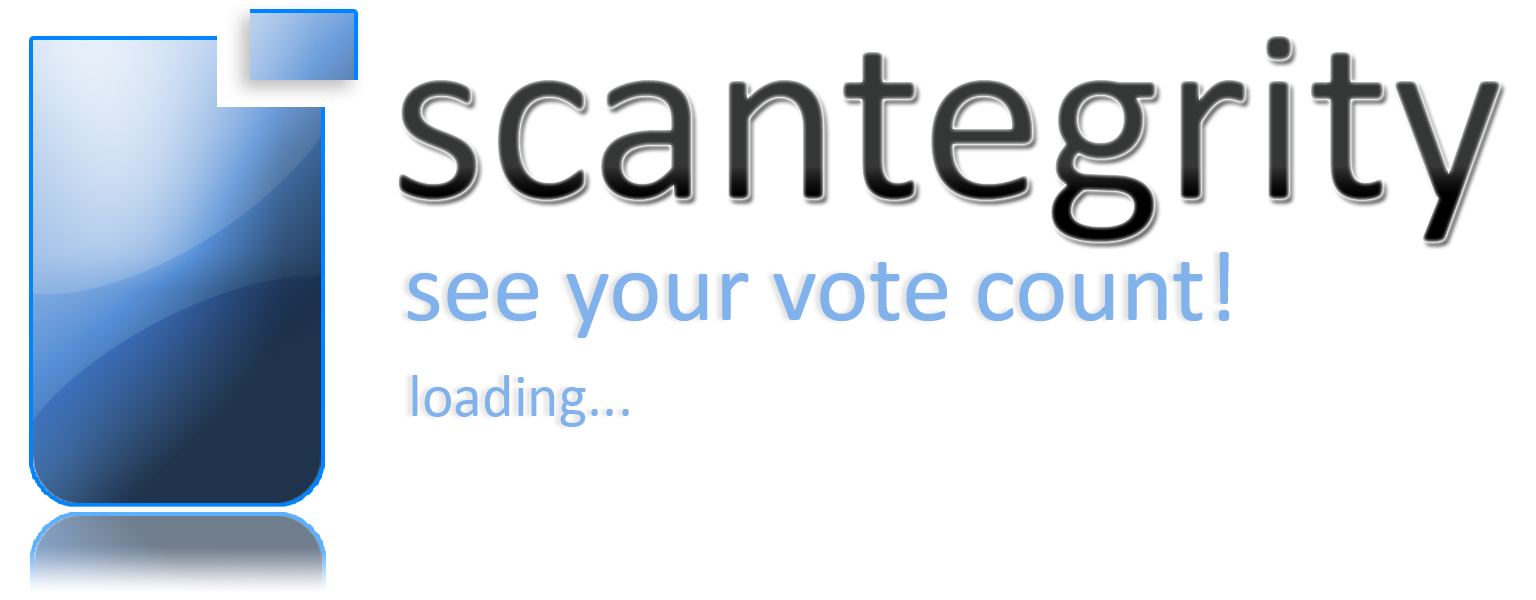
<style>
.page{position:relative;width:1536px;height:600px;background:#ffffff}
.page>*{position:absolute;margin:0}
.t1{font:250px "Calibri"}
.t2{font:100px "Calibri";color:#82b2ec}
.t3{font:60px "Calibri";color:#82b2ec}
</style>
<div class="page">
<p class="t1" style="left:398px;top:36px;width:1102px;height:206px">scantegrity</p>
<p class="t2" style="left:407px;top:252px;width:823px;height:86px">see your vote count!</p>
<p class="t3" style="left:412px;top:375px;width:217px;height:52px">loading...</p>
</div>
